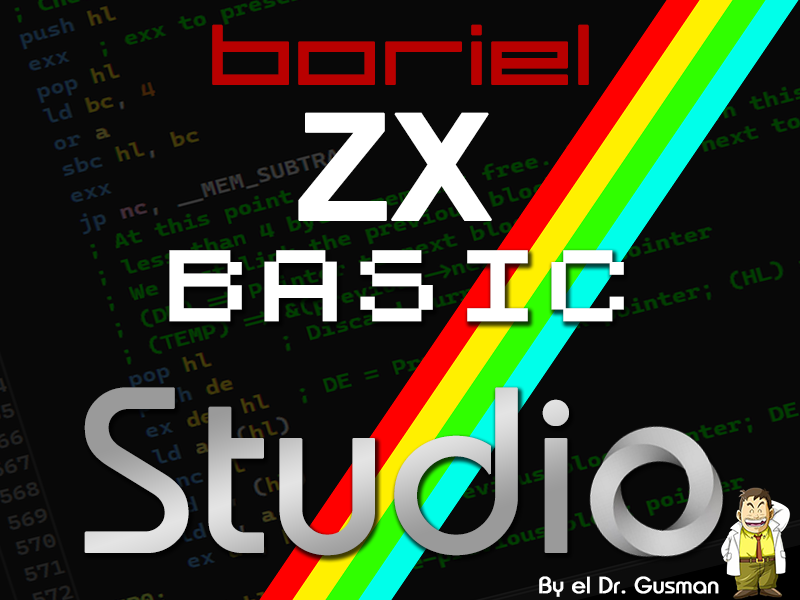
<style>
.page{position:relative;width:800px;height:600px;background:#080808}
.page>*{position:absolute;margin:0}
.t1{font:132.7px "SirClive";color:#b90000;font-weight:bold}
.t2{font:148.3px "Arial-BoldMT";color:#ffffff;font-weight:bold}
.t3{font:93px "ZXSpectrum";color:#ffffff;font-weight:bold}
.t4{font:215.5px "Belgium";font-weight:bold}
.t5{font:21.5px "Belgium";color:#ffffff;font-weight:bold}
</style>
<div class="page">
<p class="t1" style="left:212px;top:24px;width:377px;height:61px">boriel</p>
<p class="t2" style="left:298px;top:112px;width:194px;height:109px">ZX</p>
<p class="t3" style="left:169px;top:250px;width:455px;height:72px">BASIC</p>
<p class="t4" style="left:84px;top:387px;width:485px;height:169px">Studi</p>
<p class="t5" style="left:539px;top:576px;width:180px;height:21px">By el Dr. Gusman</p>
</div>
